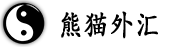
<style>
.page{position:relative;width:175px;height:47px;background:#ffffff}
.page>*{position:absolute;margin:0}
.t1{font:30px "AdobeKaitiStd-Regular";color:#000000;font-weight:bold;scale:0.83 1}
</style>
<div class="page">
<p class="t1" style="left:61px;top:11px;width:97px;height:28px">熊猫外汇</p>
</div>
